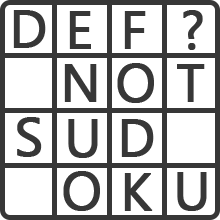
<style>
.page{position:relative;width:220px;height:220px;background:#ffffff}
.page>*{position:absolute;margin:0}
.t1{font:53.3px "SegoeUI";color:#373737;font-weight:bold}
</style>
<div class="page">
<p class="t1" style="left:13px;top:10px;width:33px;height:38px">D</p>
<p class="t1" style="left:69px;top:11px;width:22px;height:38px">E</p>
<p class="t1" style="left:124px;top:11px;width:22px;height:38px">F</p>
<p class="t1" style="left:183px;top:10px;width:20px;height:40px">?</p>
<p class="t1" style="left:64px;top:64px;width:33px;height:38px">N</p>
<p class="t1" style="left:117px;top:63px;width:37px;height:40px">O</p>
<p class="t1" style="left:177px;top:64px;width:28px;height:38px">T</p>
<p class="t1" style="left:17px;top:117px;width:25px;height:40px">S</p>
<p class="t1" style="left:68px;top:119px;width:30px;height:39px">U</p>
<p class="t1" style="left:121px;top:119px;width:33px;height:38px">D</p>
<p class="t1" style="left:63px;top:171px;width:37px;height:40px">O</p>
<p class="t1" style="left:124px;top:173px;width:29px;height:38px">K</p>
<p class="t1" style="left:177px;top:172px;width:30px;height:39px">U</p>
</div>
